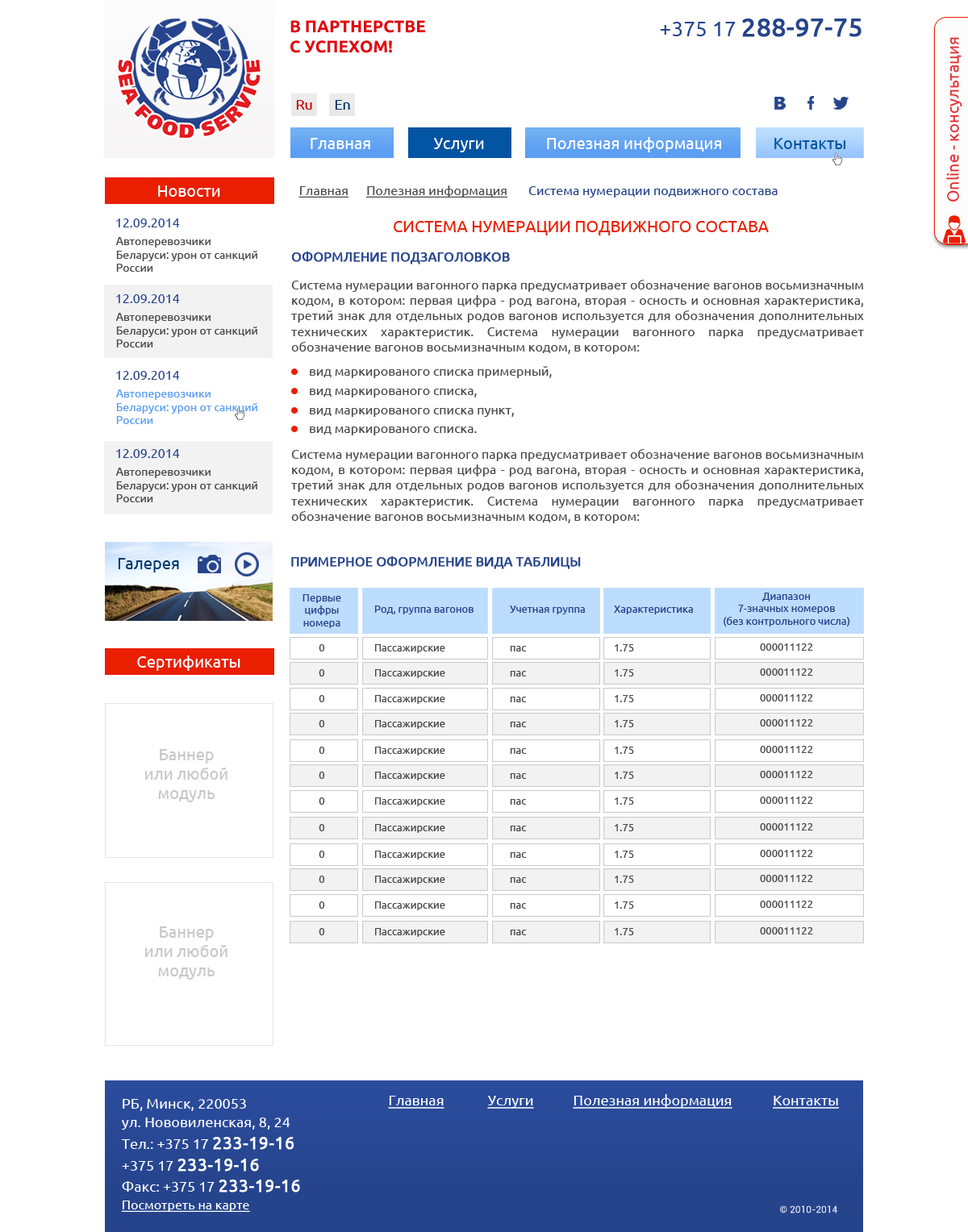
<style>
.page{position:relative;width:968px;height:1232px;background:#ffffff}
.page>*{position:absolute;margin:0}
.t1{font:16.7px "Ubuntu-Bold";color:#e1080e;text-transform:uppercase}
.t2{font:25.4px "Ubuntu";color:#26448c;font-weight:bold}
.t3{font:21.2px "Ubuntu";color:#26448c}
.t4{font:16.1px "Ubuntu";color:#e52b30}
.t5{font:14.1px "Ubuntu";color:#cc0000}
.t6{font:14.1px "Ubuntu";color:#003366}
.t7{font:16.1px "Ubuntu";color:#ffffff}
.t8{font:16.1px "Ubuntu";color:#0354a3}
.t9{font:12.9px "Ubuntu";color:#26448c}
.t10{font:12.9px "Ubuntu";color:#4a4a4a;text-decoration:underline}
.t11{font:16.1px "Ubuntu";color:#ea1e00;text-transform:uppercase}
.t12{font:11.3px "Ubuntu";color:#4a4a4a}
.t13{font:12.9px "Ubuntu";color:#26448c;text-transform:uppercase;font-weight:bold}
.t14{font:12.9px "Ubuntu";color:#4a4a4a}
.t15{font:11.3px "Ubuntu";color:#5c9ef3}
.t16{font:16.1px "Ubuntu";color:#03386c}
.t17{font:10.5px "Ubuntu";color:#26448c}
.t18{font:10.5px "Ubuntu";color:#4a4a4a}
.t19{font:16.1px "Ubuntu";color:#c7c7c7}
.t20{font:14.5px "Ubuntu";color:#ffffff;text-decoration:underline}
.t21{font:14.5px "Ubuntu";color:#ffffff}
.t22{font:14.4px "Ubuntu";color:#ffffff}
.t23{font:17.3px "Ubuntu";color:#ffffff;font-weight:bold}
.t24{font:12.9px "Ubuntu";color:#ffffff;text-decoration:underline}
.t25{font:9.7px "Roboto-Regular";color:#ffffff}
</style>
<div class="page">
<p class="t1" style="left:290px;top:20px;width:135px;height:33px">В партнерстве<br>с успехом!</p>
<p class="t2" style="left:660px;top:19px;width:201px;height:18px"><span class="t3">+375 17 </span>288-97-75</p>
<p class="t4" style="left:946px;top:37px;width:16px;height:165px;rotate:-90deg">Online - консультация</p>
<p class="t5" style="left:296px;top:100px;width:16px;height:10px">Ru</p>
<p class="t6" style="left:335px;top:100px;width:15px;height:10px">En</p>
<p class="t7" style="left:310px;top:138px;width:60px;height:11px">Главная</p>
<p class="t7" style="left:434px;top:138px;width:50px;height:14px">Услуги</p>
<p class="t7" style="left:547px;top:137px;width:174px;height:15px">Полезная информация</p>
<p class="t8" style="left:774px;top:138px;width:71px;height:11px">Контакты</p>
<p class="t7" style="left:158px;top:185px;width:62px;height:12px">Новости</p>
<p class="t9" style="left:298px;top:185px;width:479px;height:13px"><span class="t10">Главная      Полезная информация       </span>Система нумерации подвижного состава</p>
<p class="t9" style="left:116px;top:219px;width:64px;height:8px">12.09.2014</p>
<p class="t11" style="left:394px;top:221px;width:375px;height:14px">СИСТЕМА НУМЕРАЦИИ ПОДВИЖНОГО СОСТАВА</p>
<p class="t12" style="left:115px;top:237px;width:142px;height:35px">Автоперевозчики Беларуси: урон от санкций России</p>
<p class="t13" style="left:291px;top:252px;width:219px;height:13px">Оформление подзаголовков</p>
<p class="t14" style="left:291px;top:280px;width:573px;height:74px;text-align:justify">Система нумерации вагонного парка предусматривает обозначение вагонов восьмизначным кодом, в котором: первая цифра - род вагона, вторая - осность и основная характеристика, третий знак для отдельных родов вагонов используется для обозначения дополнительных технических характеристик. Система нумерации вагонного парка предусматривает обозначение вагонов восьмизначным кодом, в котором:</p>
<p class="t9" style="left:116px;top:294px;width:64px;height:9px">12.09.2014</p>
<p class="t12" style="left:115px;top:313px;width:142px;height:35px">Автоперевозчики Беларуси: урон от санкций России</p>
<p class="t9" style="left:116px;top:371px;width:64px;height:9px">12.09.2014</p>
<p class="t14" style="left:310px;top:366px;width:242px;height:12px">вид маркированого списка примерный,</p>
<p class="t15" style="left:115px;top:390px;width:142px;height:34px">Автоперевозчики Беларуси: урон от санкций России</p>
<p class="t14" style="left:310px;top:389px;width:167px;height:9px">вид маркированого списка,</p>
<p class="t14" style="left:310px;top:408px;width:204px;height:9px">вид маркированого списка пункт,</p>
<p class="t14" style="left:310px;top:427px;width:167px;height:8px">вид маркированого списка.</p>
<p class="t9" style="left:116px;top:449px;width:64px;height:9px">12.09.2014</p>
<p class="t14" style="left:291px;top:449px;width:573px;height:74px;text-align:justify">Система нумерации вагонного парка предусматривает обозначение вагонов восьмизначным кодом, в котором: первая цифра - род вагона, вторая - осность и основная характеристика, третий знак для отдельных родов вагонов используется для обозначения дополнительных технических характеристик. Система нумерации вагонного парка предусматривает обозначение вагонов восьмизначным кодом, в котором:</p>
<p class="t12" style="left:115px;top:468px;width:142px;height:34px">Автоперевозчики Беларуси: урон от санкций России</p>
<p class="t13" style="left:291px;top:556px;width:290px;height:13px">Примерное оформление вида таблицы</p>
<p class="t16" style="left:118px;top:558px;width:61px;height:15px">Галерея</p>
<p class="t17" style="left:723px;top:593px;width:127px;height:34px;text-align:center">Диапазон<br>7-значных номеров<br>(без контрольного числа)</p>
<p class="t17" style="left:302px;top:594px;width:39px;height:34px;text-align:center">Первые<br>цифры<br>номера</p>
<p class="t17" style="left:375px;top:606px;width:98px;height:8px">Род, группа вагонов</p>
<p class="t17" style="left:510px;top:606px;width:75px;height:8px">Учетная группа</p>
<p class="t17" style="left:614px;top:606px;width:79px;height:8px">Характеристика</p>
<p class="t18" style="left:319px;top:644px;width:6px;height:8px">0</p>
<p class="t18" style="left:375px;top:644px;width:70px;height:9px">Пассажирские</p>
<p class="t18" style="left:510px;top:646px;width:16px;height:6px">пас</p>
<p class="t18" style="left:614px;top:644px;width:20px;height:8px">1.75</p>
<p class="t18" style="left:760px;top:644px;width:53px;height:7px">000011122</p>
<p class="t7" style="left:137px;top:656px;width:103px;height:15px">Сертификаты</p>
<p class="t18" style="left:319px;top:669px;width:6px;height:8px">0</p>
<p class="t18" style="left:375px;top:669px;width:70px;height:9px">Пассажирские</p>
<p class="t18" style="left:510px;top:671px;width:16px;height:6px">пас</p>
<p class="t18" style="left:614px;top:669px;width:20px;height:8px">1.75</p>
<p class="t18" style="left:760px;top:669px;width:53px;height:7px">000011122</p>
<p class="t18" style="left:319px;top:695px;width:6px;height:7px">0</p>
<p class="t18" style="left:375px;top:695px;width:70px;height:9px">Пассажирские</p>
<p class="t18" style="left:510px;top:697px;width:16px;height:5px">пас</p>
<p class="t18" style="left:614px;top:695px;width:20px;height:7px">1.75</p>
<p class="t18" style="left:760px;top:694px;width:53px;height:8px">000011122</p>
<p class="t18" style="left:319px;top:720px;width:6px;height:7px">0</p>
<p class="t18" style="left:375px;top:720px;width:70px;height:9px">Пассажирские</p>
<p class="t18" style="left:510px;top:722px;width:16px;height:5px">пас</p>
<p class="t18" style="left:614px;top:720px;width:20px;height:7px">1.75</p>
<p class="t18" style="left:760px;top:719px;width:53px;height:8px">000011122</p>
<p class="t19" style="left:145px;top:749px;width:82px;height:53px;text-align:center">Баннер<br>или любой<br>модуль</p>
<p class="t18" style="left:319px;top:747px;width:6px;height:7px">0</p>
<p class="t18" style="left:375px;top:747px;width:70px;height:9px">Пассажирские</p>
<p class="t18" style="left:510px;top:748px;width:16px;height:6px">пас</p>
<p class="t18" style="left:614px;top:747px;width:20px;height:7px">1.75</p>
<p class="t18" style="left:760px;top:746px;width:53px;height:7px">000011122</p>
<p class="t18" style="left:319px;top:772px;width:6px;height:7px">0</p>
<p class="t18" style="left:375px;top:772px;width:70px;height:9px">Пассажирские</p>
<p class="t18" style="left:510px;top:773px;width:16px;height:6px">пас</p>
<p class="t18" style="left:614px;top:772px;width:20px;height:7px">1.75</p>
<p class="t18" style="left:760px;top:771px;width:53px;height:7px">000011122</p>
<p class="t18" style="left:319px;top:798px;width:6px;height:7px">0</p>
<p class="t18" style="left:375px;top:798px;width:70px;height:8px">Пассажирские</p>
<p class="t18" style="left:614px;top:798px;width:20px;height:7px">1.75</p>
<p class="t18" style="left:760px;top:797px;width:53px;height:7px">000011122</p>
<p class="t18" style="left:510px;top:799px;width:16px;height:6px">пас</p>
<p class="t18" style="left:319px;top:824px;width:6px;height:7px">0</p>
<p class="t18" style="left:375px;top:824px;width:70px;height:9px">Пассажирские</p>
<p class="t18" style="left:510px;top:826px;width:16px;height:5px">пас</p>
<p class="t18" style="left:614px;top:824px;width:20px;height:7px">1.75</p>
<p class="t18" style="left:760px;top:823px;width:53px;height:8px">000011122</p>
<p class="t18" style="left:319px;top:851px;width:6px;height:7px">0</p>
<p class="t18" style="left:375px;top:851px;width:70px;height:9px">Пассажирские</p>
<p class="t18" style="left:510px;top:852px;width:16px;height:6px">пас</p>
<p class="t18" style="left:614px;top:851px;width:20px;height:7px">1.75</p>
<p class="t18" style="left:760px;top:850px;width:53px;height:7px">000011122</p>
<p class="t18" style="left:319px;top:876px;width:6px;height:7px">0</p>
<p class="t18" style="left:375px;top:876px;width:70px;height:9px">Пассажирские</p>
<p class="t18" style="left:510px;top:877px;width:16px;height:6px">пас</p>
<p class="t18" style="left:614px;top:876px;width:20px;height:7px">1.75</p>
<p class="t18" style="left:760px;top:875px;width:53px;height:7px">000011122</p>
<p class="t18" style="left:319px;top:902px;width:6px;height:7px">0</p>
<p class="t18" style="left:375px;top:902px;width:70px;height:8px">Пассажирские</p>
<p class="t18" style="left:510px;top:903px;width:16px;height:6px">пас</p>
<p class="t18" style="left:614px;top:902px;width:20px;height:7px">1.75</p>
<p class="t18" style="left:760px;top:901px;width:53px;height:7px">000011122</p>
<p class="t19" style="left:145px;top:927px;width:82px;height:53px;text-align:center">Баннер<br>или любой<br>модуль</p>
<p class="t18" style="left:319px;top:928px;width:6px;height:7px">0</p>
<p class="t18" style="left:375px;top:928px;width:70px;height:9px">Пассажирские</p>
<p class="t18" style="left:510px;top:930px;width:16px;height:5px">пас</p>
<p class="t18" style="left:614px;top:928px;width:20px;height:7px">1.75</p>
<p class="t18" style="left:760px;top:927px;width:53px;height:8px">000011122</p>
<p class="t20" style="left:388px;top:1096px;width:56px;height:13px">Главная</p>
<p class="t20" style="left:487px;top:1096px;width:47px;height:13px">Услуги</p>
<p class="t20" style="left:573px;top:1094px;width:159px;height:15px">Полезная информация</p>
<p class="t20" style="left:773px;top:1096px;width:66px;height:13px">Контакты</p>
<p class="t21" style="left:123px;top:1099px;width:123px;height:12px">РБ, Минск, 220053</p>
<p class="t21" style="left:121px;top:1118px;width:169px;height:12px">ул. Нововиленская, 8, 24</p>
<p class="t22" style="left:121px;top:1137px;width:173px;height:13px">Тел.: +375 17 <span class="t23">233-19-16</span></p>
<p class="t23" style="left:122px;top:1159px;width:137px;height:13px"><span class="t22">+375 17 </span>233-19-16</p>
<p class="t22" style="left:122px;top:1180px;width:178px;height:13px">Факс: +375 17 <span class="t23">233-19-16</span></p>
<p class="t24" style="left:121px;top:1201px;width:129px;height:11px">Посмотреть на карте</p>
<p class="t25" style="left:780px;top:1206px;width:57px;height:8px">© 2010-2014</p>
</div>
